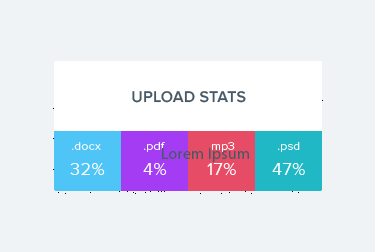
<style>
.page{position:relative;width:375px;height:252px;background:#f0f3f6}
.page>*{position:absolute;margin:0}
.t1{font:16px "ProximaNova-Semibold";letter-spacing:0.01em;color:#475965}
.t2{font:12px "ProximaNova-Light";letter-spacing:0.025em;color:#ffffff}
.t3{font:16px "MyriadPro-Regular";letter-spacing:0.01em;color:#475965}
.t4{font:18px "ProximaNova-Regular";letter-spacing:0.025em;color:#ffffff}
</style>
<div class="page">
<p class="t1" style="left:132px;top:91px;width:114px;height:12px">UPLOAD STATS</p>
<p class="t2" style="left:72px;top:142px;width:29px;height:8px">.docx</p>
<p class="t2" style="left:144px;top:142px;width:21px;height:10px">.pdf</p>
<p class="t3" style="left:162px;top:148px;width:87px;height:14px">Lorem Ipsum</p>
<p class="t2" style="left:209px;top:142px;width:26px;height:10px">.mp3</p>
<p class="t2" style="left:278px;top:142px;width:22px;height:10px">.psd</p>
<p class="t4" style="left:70px;top:163px;width:35px;height:12px">32%</p>
<p class="t4" style="left:143px;top:163px;width:24px;height:12px">4%</p>
<p class="t4" style="left:207px;top:163px;width:29px;height:12px">17%</p>
<p class="t4" style="left:272px;top:163px;width:33px;height:12px">47%</p>
</div>
